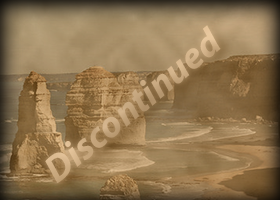
<style>
.page{position:relative;width:280px;height:200px}
.page>*{position:absolute;margin:0}
.t1{font:37.7px "MyriadHebrew-BoldIt";color:#c9a981}
</style>
<div class="page">
<p class="t1" style="left:45px;top:25px;width:176px;height:159px;rotate:-39deg">Discontinued</p>
</div>
